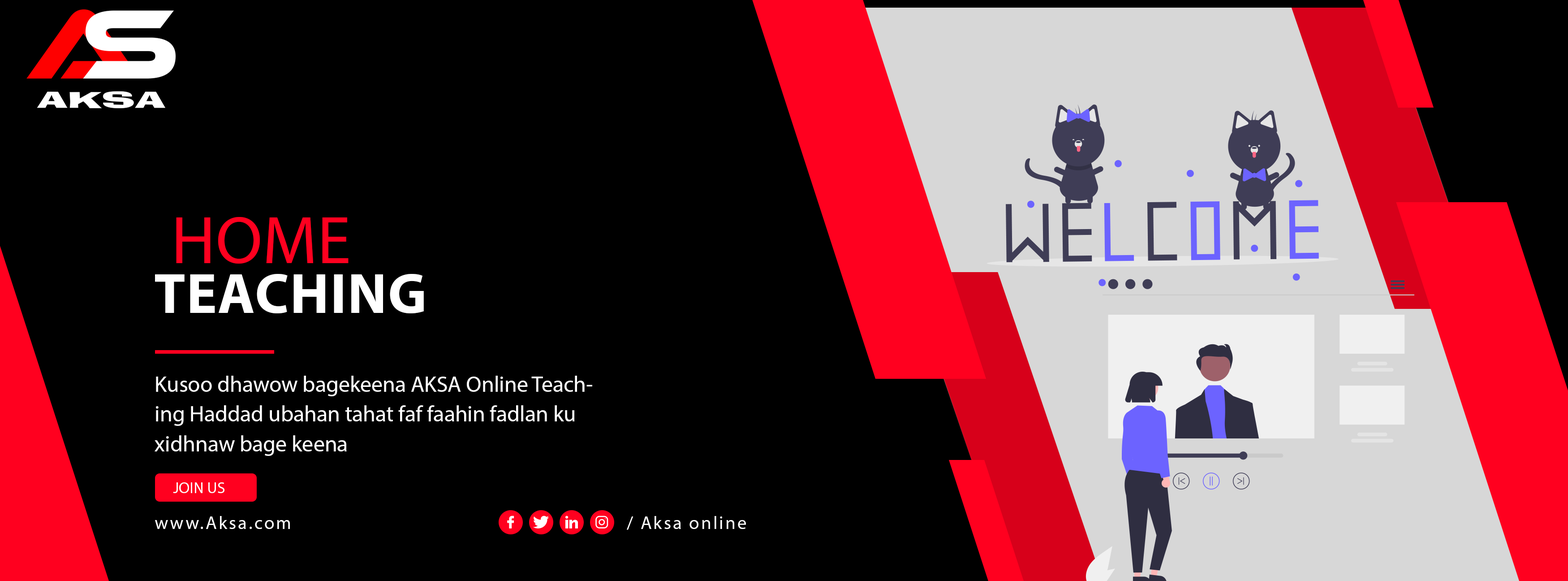
<style>
.page{position:relative;width:1568px;height:581px;background:#000000}
.page>*{position:absolute;margin:0}
.t1{font:67.9px "MyriadPro-Regular";color:#ff001f;text-transform:uppercase}
.t2{font:56.8px "MyriadPro-Bold";color:#ffffff;text-transform:uppercase}
.t3{font:22.4px/29.9px "MyriadPro-Regular";color:#ffffff}
.t4{font:15.7px "MyriadPro-Regular";color:#ffffff;text-transform:uppercase}
.t5{font:18.3px "MyriadPro-Regular";letter-spacing:0.1em;color:#ffffff}
</style>
<div class="page">
<p class="t1" style="left:176px;top:217px;width:173px;height:46px">Home</p>
<p class="t2" style="left:155px;top:274px;width:269px;height:39px">Teaching</p>
<p class="t3" style="left:155px;top:375px;width:437px;height:81px">Kusoo dhawow bagekeena AKSA Online Teaching Haddad ubahan tahat faf faahin fadlan ku xidhnaw bage keena</p>
<p class="t4" style="left:173px;top:482px;width:51px;height:11px">join us</p>
<p class="t5" style="left:155px;top:516px;width:135px;height:13px">www.Aksa.com</p>
<p class="t5" style="left:627px;top:516px;width:119px;height:14px">/ Aksa online</p>
</div>
